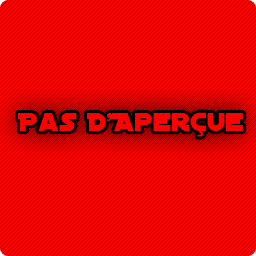
<style>
.page{position:relative;width:256px;height:256px;background:#ff0000}
.page>*{position:absolute;margin:0}
.t1{font:28.1px "DistantGalaxy";color:#ff0000}
</style>
<div class="page">
<p class="t1" style="left:18px;top:112px;width:225px;height:25px">Pas D’Aperçue</p>
</div>
